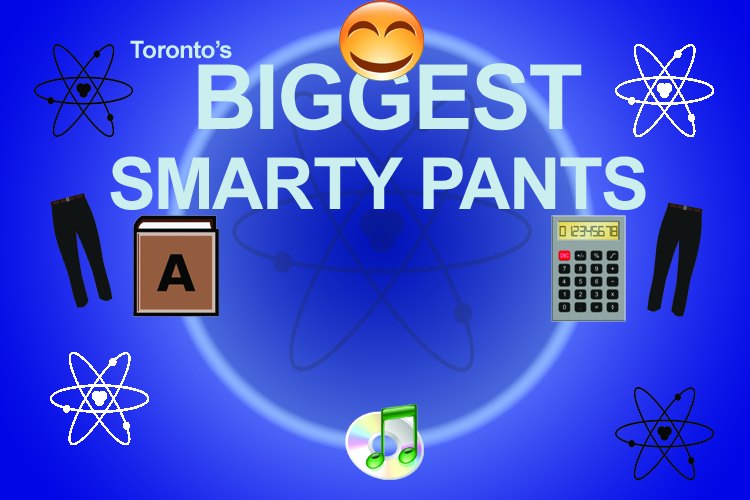
<style>
.page{position:relative;width:750px;height:500px}
.page>*{position:absolute;margin:0}
.t1{font:24px "Arial-BoldMT";letter-spacing:-0.025em;color:#cbefee}
.t2{font:90px "Arial-BoldMT";letter-spacing:-0.025em;color:#cbefee}
.t3{font:72px "Arial-BoldMT";letter-spacing:-0.025em;color:#cbefee}
</style>
<div class="page">
<p class="t1" style="left:130px;top:40px;width:102px;height:19px">Toronto’s</p>
<p class="t2" style="left:198px;top:63px;width:384px;height:68px">BIGGEST</p>
<p class="t3" style="left:110px;top:156px;width:536px;height:54px">SMARTY PANTS</p>
</div>
